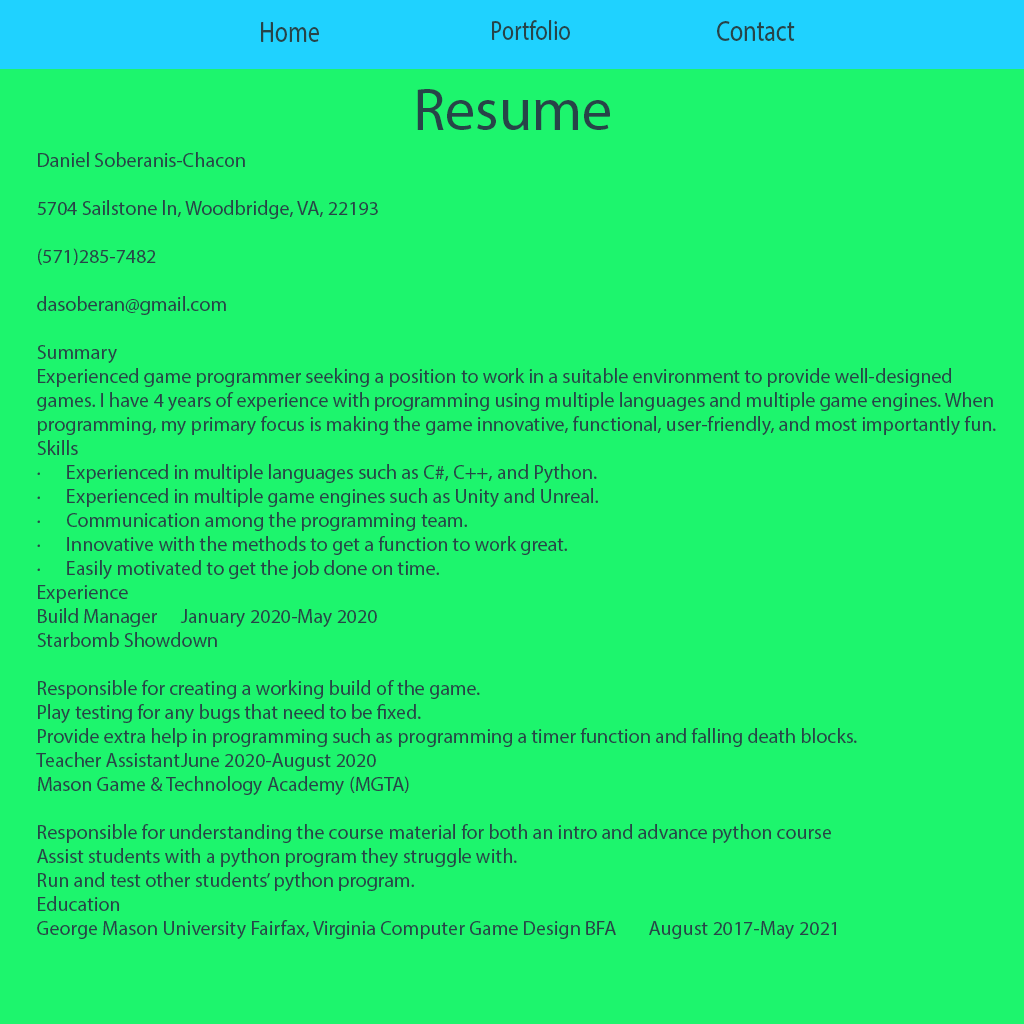
<style>
.page{position:relative;width:1024px;height:1024px;background:#1df56d}
.page>*{position:absolute;margin:0}
.t1{font:29.8px "MyriadPro-Regular";color:#274448;scale:0.8 1}
.t2{font:28.3px "MyriadPro-Regular";color:#274448;scale:0.79 1}
.t3{font:60px "MyriadPro-Regular";color:#274448}
.t4{font:20px "MyriadPro-Regular";color:#274448}
</style>
<div class="page">
<p class="t1" style="left:261px;top:22px;width:58px;height:20px">Home</p>
<p class="t2" style="left:492px;top:20px;width:78px;height:20px">Portfolio</p>
<p class="t1" style="left:717px;top:21px;width:78px;height:20px">Contact</p>
<p class="t3" style="left:417px;top:89px;width:193px;height:41px">Resume</p>
<p class="t4" style="left:36px;top:152px;width:960px;height:787px">Daniel Soberanis-Chacon<br><br>5704 Sailstone ln, Woodbridge, VA, 22193<br><br>(571)285-7482<br><br>dasoberan@gmail.com<br><br>Summary<br>Experienced game programmer seeking a position to work in a suitable environment to provide well-designed games. I have 4 years of experience with programming using multiple languages and multiple game engines. When programming, my primary focus is making the game innovative, functional, user-friendly, and most importantly fun. <br>Skills<br>·      Experienced in multiple languages such as C#, C++, and Python.<br>·      Experienced in multiple game engines such as Unity and Unreal.<br>·      Communication among the programming team.<br>·      Innovative with the methods to get a function to work great.<br>·      Easily motivated to get the job done on time.<br>Experience<br>Build Manager January 2020-May 2020<br>Starbomb Showdown<br><br>Responsible for creating a working build of the game.<br>Play testing for any bugs that need to be fixed.<br>Provide extra help in programming such as programming a timer function and falling death blocks.<br>Teacher Assistant June 2020-August 2020<br>Mason Game &amp; Technology Academy (MGTA)<br><br>Responsible for understanding the course material for both an intro and advance python course<br>Assist students with a python program they struggle with.<br>Run and test other students’ python program.<br>Education<br>George Mason University Fairfax, Virginia Computer Game Design BFA August 2017-May 2021</p>
</div>
